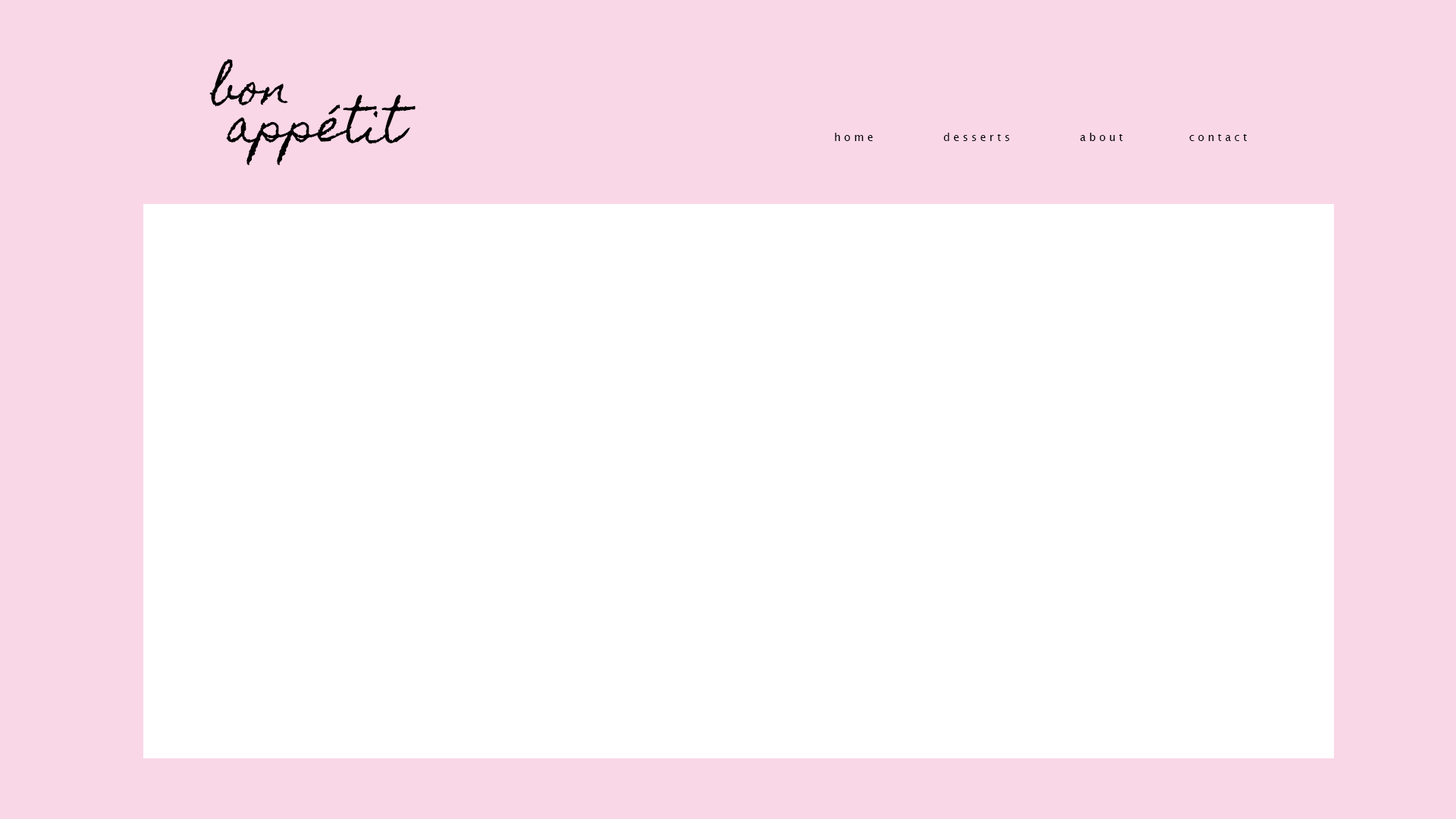
<style>
.page{position:relative;width:1456px;height:819px;background:#ffffff}
.page>*{position:absolute;margin:0}
.t1{font:45.5px/37.9px "HomemadeApple-Regular";color:#000000}
.t2{font:10.6px "LucidaSansUnicode";color:#000000}
</style>
<div class="page">
<p class="t1" style="left:209px;top:59px;width:207px;height:106px">bon<br> appétit</p>
<p class="t2" style="left:835px;top:133px;width:412px;height:8px">h o m e   d e s s e r t s   a b o u t   c o n t a c t</p>
</div>
